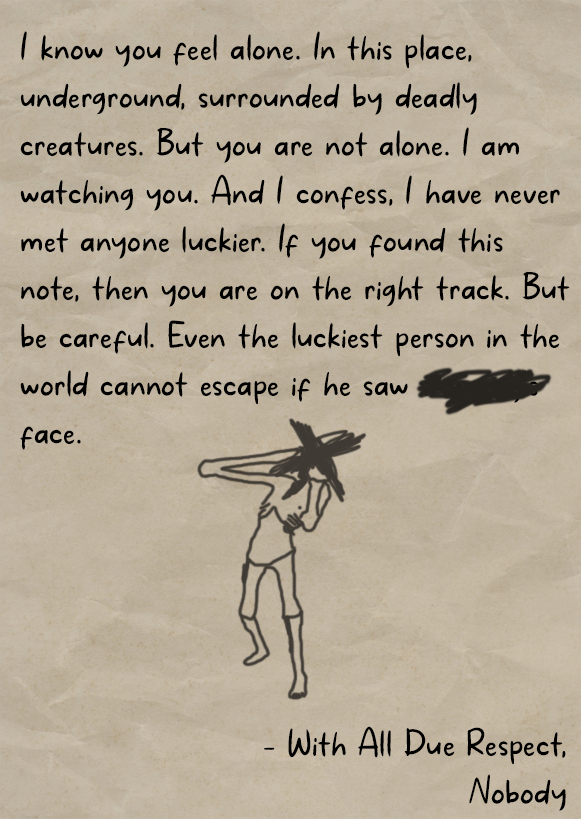
<style>
.page{position:relative;width:581px;height:819px}
.page>*{position:absolute;margin:0}
.t1{font:40px "MakanHatiCyrillicRegular";letter-spacing:0.01em;color:#000000}
</style>
<div class="page">
<p class="t1" style="left:20px;top:31px;width:550px;height:419px">I know you feel alone. In this place, underground, surrounded by deadly creatures. But you are not alone. I am watching you. And I confess, I have never met anyone luckier. If you found this note, then you are on the right track. But be careful. Even the luckiest person in the world cannot escape if he saw shy guy’s face.</p>
<p class="t1" style="left:264px;top:726px;width:302px;height:85px;text-align:justify">- With All Due Respect, <br>Nobody</p>
</div>
